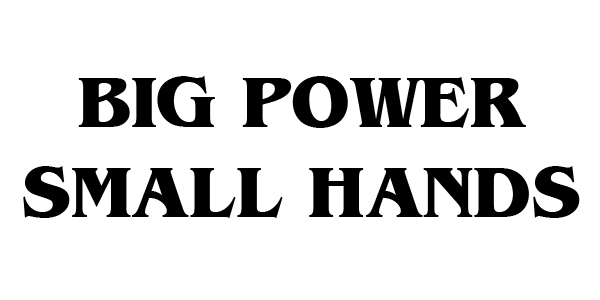
<style>
.page{position:relative;width:600px;height:300px;background:#ffffff}
.page>*{position:absolute;margin:0}
.t1{font:75px "AGBenguiatCyrBoldBold";color:#000000}
</style>
<div class="page">
<p class="t1" style="left:23px;top:75px;width:557px;height:143px;text-align:center">BIG POWER<br>SMALL HANDS</p>
</div>
